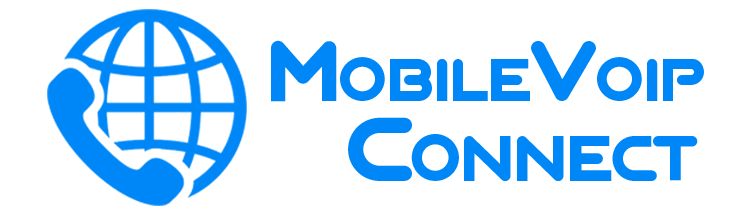
<style>
.page{position:relative;width:753px;height:214px;background:#ffffff}
.page>*{position:absolute;margin:0}
.t1{font:75.2px "AGALEGA-Regular";color:#0087f7;font-variant:small-caps}
.t2{font:75.2px "AGALEGA-Regular";color:#0087f7}
.t3{font:79.4px "AGALEGA-Regular";color:#0087f7;font-variant:small-caps}
.t4{font:79.4px "AGALEGA-Regular";color:#0087f7}
</style>
<div class="page">
<p class="t1" style="left:271px;top:40px;width:433px;height:62px"><span class="t2">m</span>obile<span class="t2">v</span>oip</p>
<p class="t3" style="left:348px;top:117px;width:350px;height:64px"><span class="t4">c</span>onnect</p>
</div>
